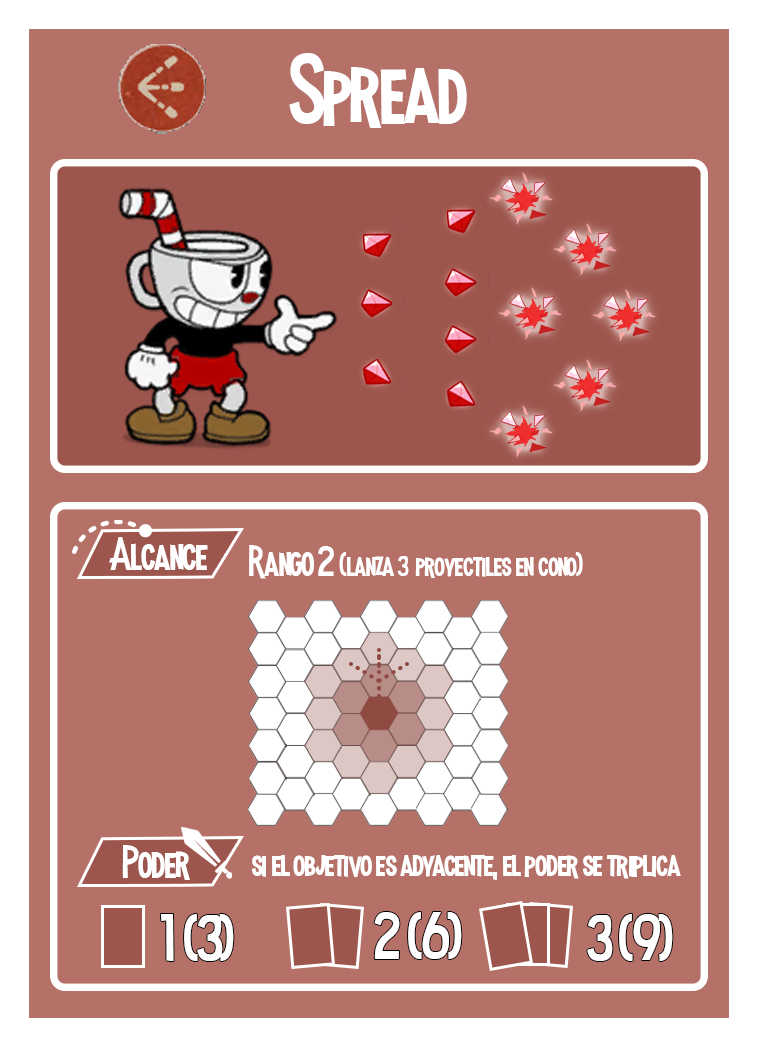
<style>
.page{position:relative;width:758px;height:1047px;background:#b57168}
.page>*{position:absolute;margin:0}
.t1{font:100px "MadnessHyperactive";color:#ffffff}
.t2{font:45.8px "MadnessHyperactive";color:#ffffff}
.t3{font:33.3px "MadnessHyperactive";color:#ffffff}
.t4{font:41.7px "MadnessHyperactive";color:#ffffff}
.t5{font:27.5px "MadnessHyperactive";color:#ffffff}
.t6{font:37.5px "MadnessHyperactive";color:#ffffff}
.t7{font:66.3px "MadnessHyperactive";color:#ffffff}
</style>
<div class="page">
<p class="t1" style="left:289px;top:53px;width:178px;height:75px">Spread</p>
<p class="t2" style="left:109px;top:537px;width:99px;height:33px">Alcance</p>
<p class="t3" style="left:249px;top:545px;width:334px;height:34px"><span class="t4">Rango 2 </span>(lanza <span class="t5">3 </span> proyectiles en cono)</p>
<p class="t2" style="left:122px;top:845px;width:68px;height:35px">Poder</p>
<p class="t6" style="left:251px;top:854px;width:430px;height:26px">si el objetivo es adyacente, el poder se triplica</p>
<p class="t7" style="left:160px;top:914px;width:74px;height:48px">1 (3)</p>
<p class="t7" style="left:374px;top:912px;width:88px;height:47px">2 (6)</p>
<p class="t7" style="left:587px;top:914px;width:86px;height:47px">3 (9)</p>
</div>
